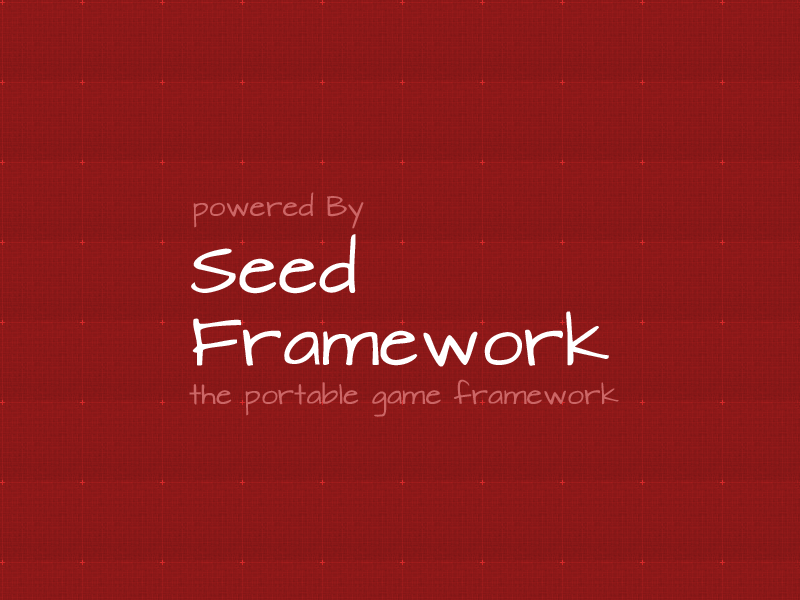
<style>
.page{position:relative;width:800px;height:600px}
.page>*{position:absolute;margin:0}
.t1{font:24px "ArchitectsDaughter";color:#cc6666}
.t2{font:60px "ArchitectsDaughter";color:#ffffff}
</style>
<div class="page">
<p class="t1" style="left:193px;top:192px;width:171px;height:37px">powered By</p>
<p class="t2" style="left:191px;top:234px;width:418px;height:133px">Seed<br>Framework</p>
<p class="t1" style="left:189px;top:379px;width:430px;height:38px">the portable game framework</p>
</div>
